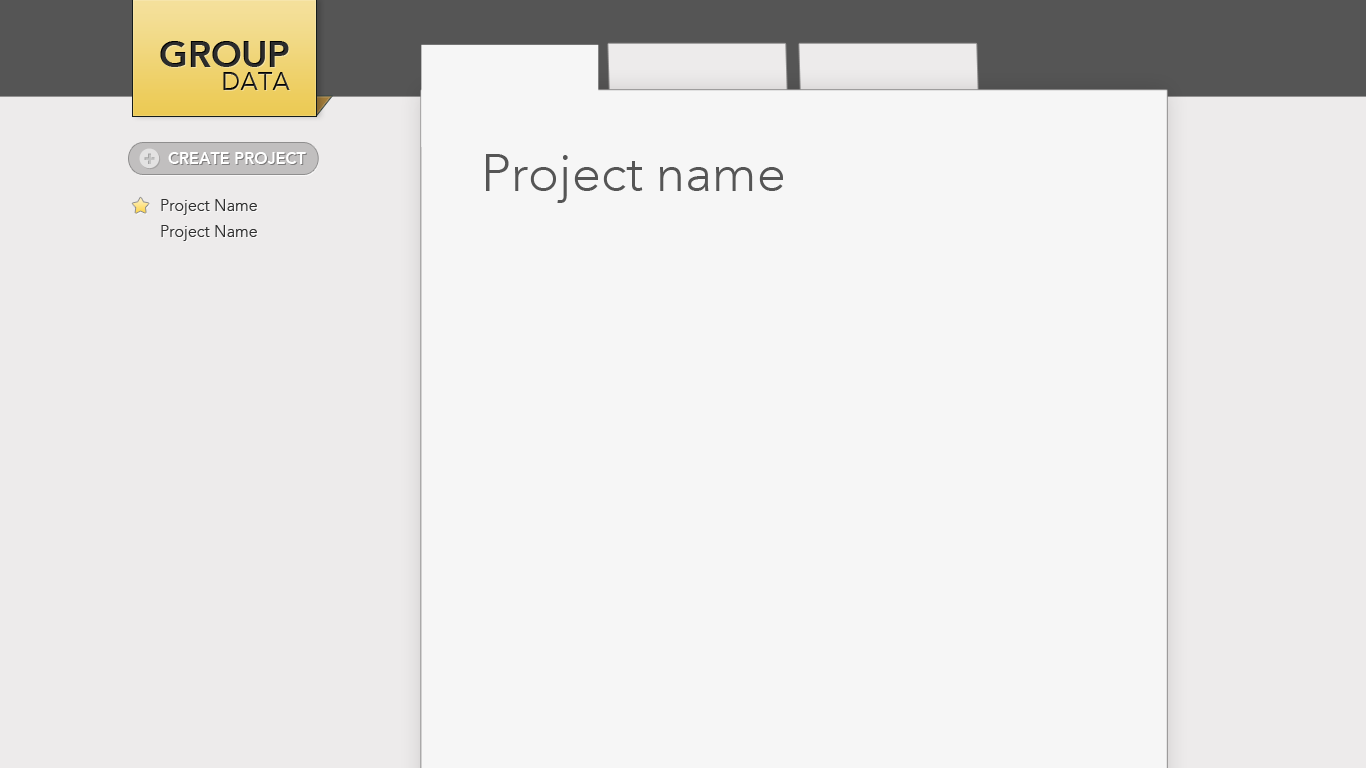
<style>
.page{position:relative;width:1366px;height:768px;background:#f6f6f6}
.page>*{position:absolute;margin:0}
.t1{font:36.6px/29.5px "Avenir-Heavy";color:#2c2c2c}
.t2{font:25.4px/23.5px "AvenirLTStd-Light";color:#2c2c2c}
.t3{font:20.2px "HelveticaNeueLTStd-XBlkCn";color:#c5c5c5}
.t4{font:16.1px "Avenir-Heavy";color:#ffffff}
.t5{font:52px "AvenirLTStd-Light";color:#555555}
.t6{font:16.1px "AvenirLTStd-Light";color:#303030}
</style>
<div class="page">
<p class="t1" style="left:160px;top:41px;width:130px;height:49px;text-align:right">GROUP<br><span class="t2">DATA</span></p>
<p class="t3" style="left:144px;top:153px;width:11px;height:11px">+</p>
<p class="t4" style="left:168px;top:152px;width:138px;height:12px">CREATE PROJECT</p>
<p class="t5" style="left:486px;top:154px;width:297px;height:49px">Project name</p>
<p class="t6" style="left:161px;top:199px;width:96px;height:16px">Project Name</p>
<p class="t6" style="left:161px;top:225px;width:96px;height:16px">Project Name</p>
</div>
